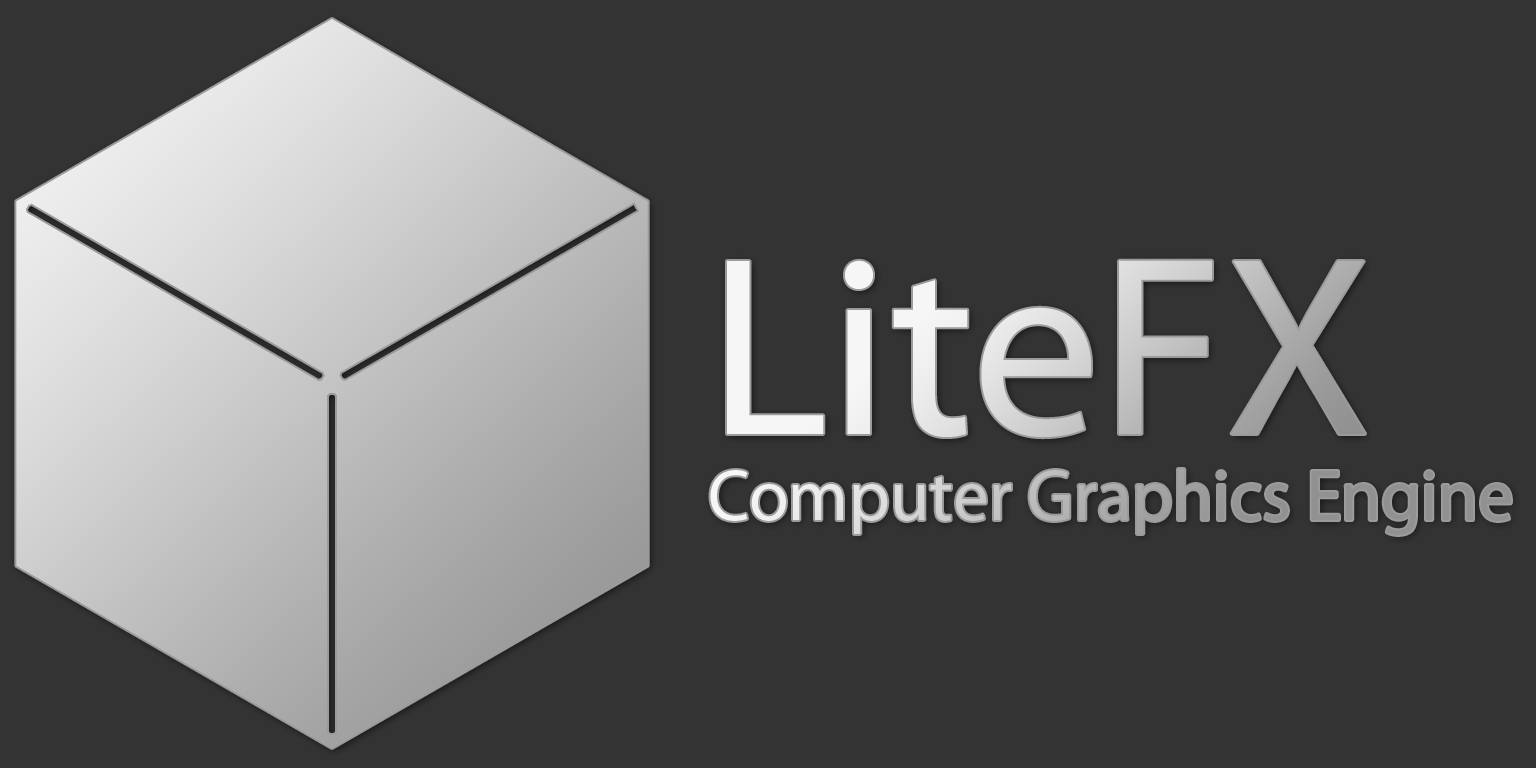
<style>
.page{position:relative;width:1536px;height:768px;background:#333333}
.page>*{position:absolute;margin:0}
.t1{font:72px "MyriadPro-Regular"}
.t2{font:256px "MyriadPro-Regular"}
</style>
<div class="page">
<p class="t1" style="left:710px;top:260px;width:801px;height:275px"><span class="t2">LiteFX<br></span>Computer Graphics Engine</p>
</div>
